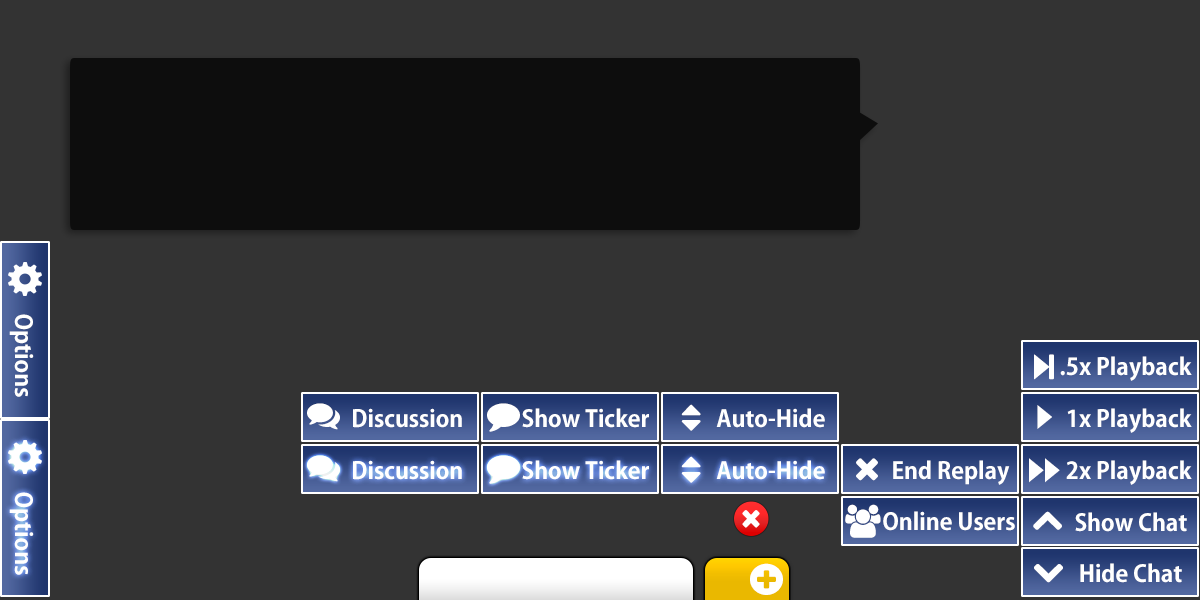
<style>
.page{position:relative;width:1200px;height:600px;background:#333333}
.page>*{position:absolute;margin:0}
.t1{font:23px "KozGoPr6N-Bold";color:#ffffff}
</style>
<div class="page">
<p class="t1" style="left:9px;top:314px;width:25px;height:83px;rotate:90deg">Options</p>
<p class="t1" style="left:1060px;top:356px;width:132px;height:25px">.5x Playback</p>
<p class="t1" style="left:353px;top:408px;width:109px;height:20px">Discussion</p>
<p class="t1" style="left:522px;top:408px;width:127px;height:20px">Show Ticker</p>
<p class="t1" style="left:716px;top:408px;width:109px;height:20px">Auto-Hide</p>
<p class="t1" style="left:1067px;top:408px;width:125px;height:25px">1x Playback</p>
<p class="t1" style="left:353px;top:460px;width:109px;height:20px">Discussion</p>
<p class="t1" style="left:522px;top:460px;width:127px;height:20px">Show Ticker</p>
<p class="t1" style="left:716px;top:460px;width:109px;height:20px">Auto-Hide</p>
<p class="t1" style="left:893px;top:460px;width:117px;height:25px">End Replay</p>
<p class="t1" style="left:1066px;top:460px;width:126px;height:25px">2x Playback</p>
<p class="t1" style="left:9px;top:492px;width:25px;height:83px;rotate:90deg">Options</p>
<p class="t1" style="left:883px;top:511px;width:132px;height:20px">Online Users</p>
<p class="t1" style="left:1075px;top:512px;width:112px;height:20px">Show Chat</p>
<p class="t1" style="left:1080px;top:563px;width:102px;height:20px">Hide Chat</p>
</div>
